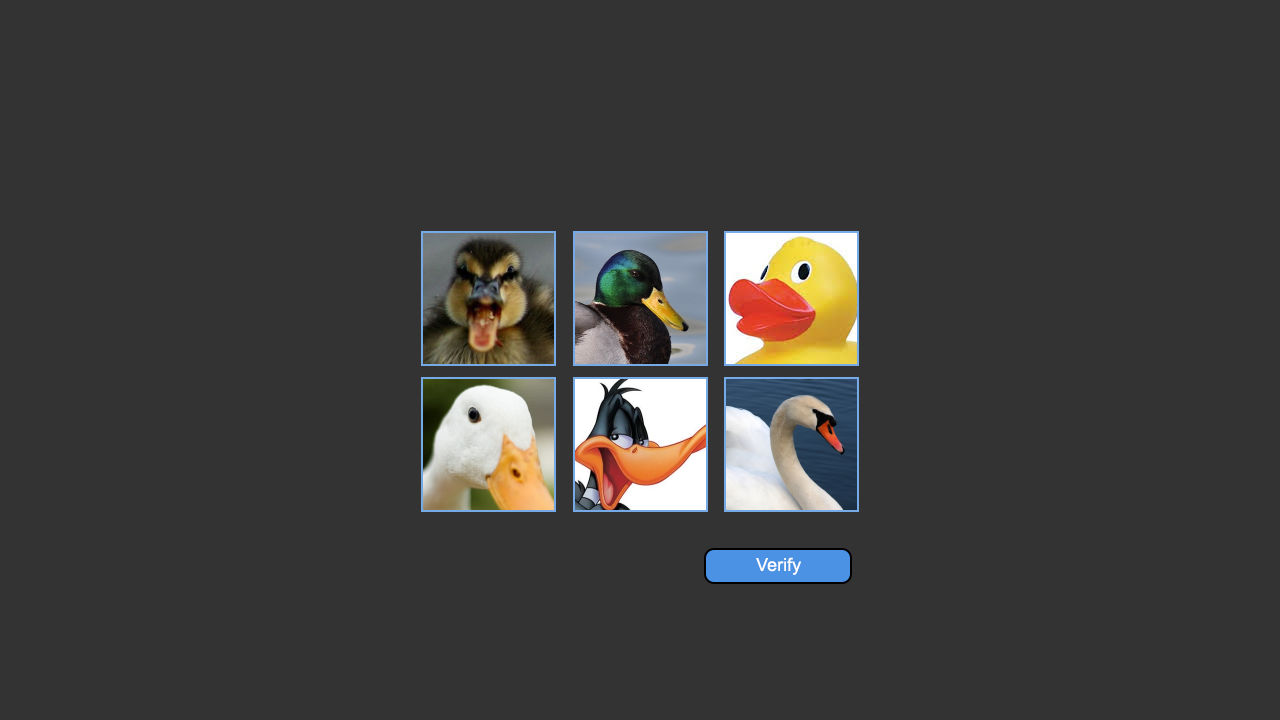
<style>
.page{position:relative;width:1280px;height:720px;background:#333333}
.page>*{position:absolute;margin:0}
.t1{font:18px "ArialMT";color:#ffffff}
</style>
<div class="page">
<p class="t1" style="left:756px;top:557px;width:45px;height:18px">Verify</p>
</div>
